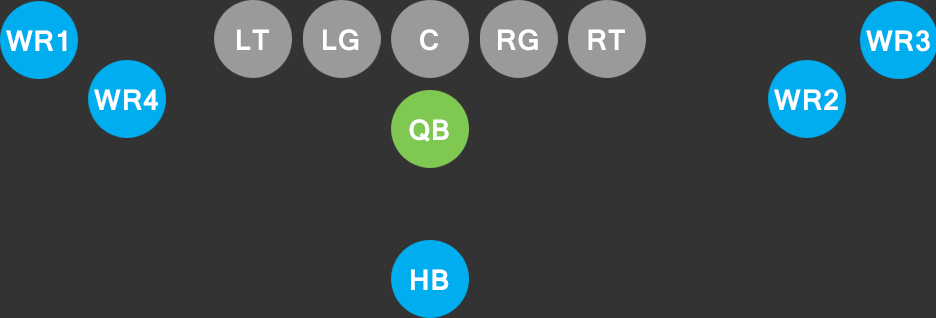
<style>
.page{position:relative;width:936px;height:318px;background:#333333}
.page>*{position:absolute;margin:0}
.t1{font:31.8px "Vrinda-Bold";color:#ffffff}
</style>
<div class="page">
<p class="t1" style="left:6px;top:30px;width:61px;height:21px">WR1</p>
<p class="t1" style="left:237px;top:29px;width:32px;height:21px">LT</p>
<p class="t1" style="left:323px;top:29px;width:36px;height:22px">LG</p>
<p class="t1" style="left:420px;top:29px;width:18px;height:22px">C</p>
<p class="t1" style="left:498px;top:29px;width:40px;height:22px">RG</p>
<p class="t1" style="left:588px;top:29px;width:37px;height:21px">RT</p>
<p class="t1" style="left:866px;top:30px;width:64px;height:22px">WR3</p>
<p class="t1" style="left:94px;top:89px;width:64px;height:21px">WR4</p>
<p class="t1" style="left:774px;top:89px;width:64px;height:21px">WR2</p>
<p class="t1" style="left:409px;top:119px;width:40px;height:23px">QB</p>
<p class="t1" style="left:411px;top:269px;width:38px;height:21px">HB</p>
</div>
